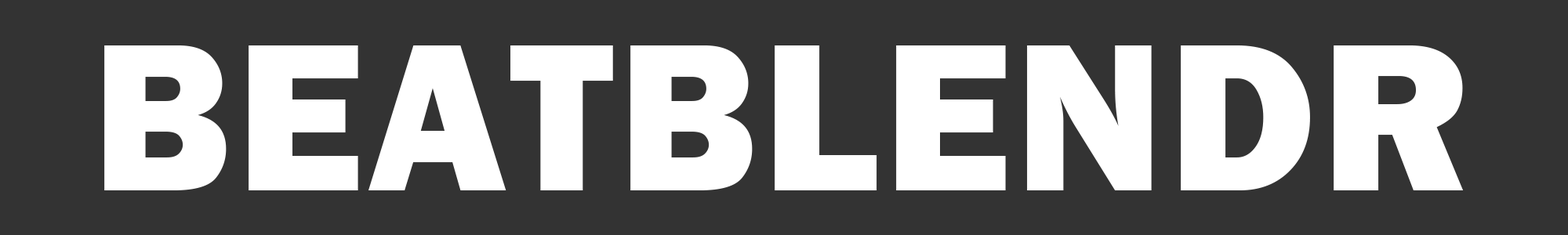
<style>
.page{position:relative;width:1568px;height:235px;background:#333333}
.page>*{position:absolute;margin:0}
.t1{font:217.8px "FranklinGothic-Heavy";letter-spacing:0.02em;color:#ffffff}
</style>
<div class="page">
<p class="t1" style="left:104px;top:45px;width:1360px;height:146px">BEATBLENDR</p>
</div>
